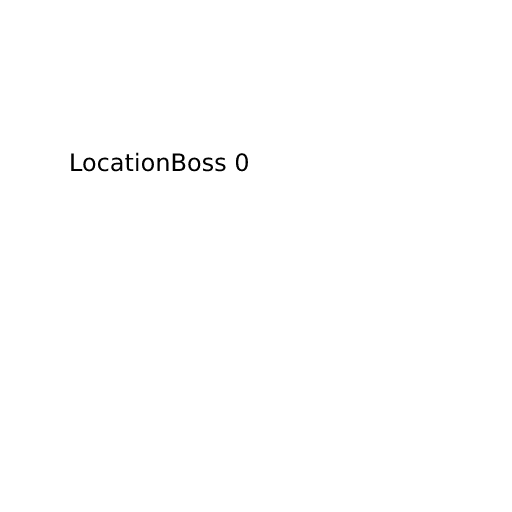
<style>
.page{position:relative;width:512px;height:512px;background:#ffffff}
.page>*{position:absolute;margin:0}
.t1{font:24px "DejaVuSans";color:#000000}
</style>
<div class="page">
<p class="t1" style="left:71px;top:152px;width:177px;height:20px">LocationBoss 0</p>
</div>
